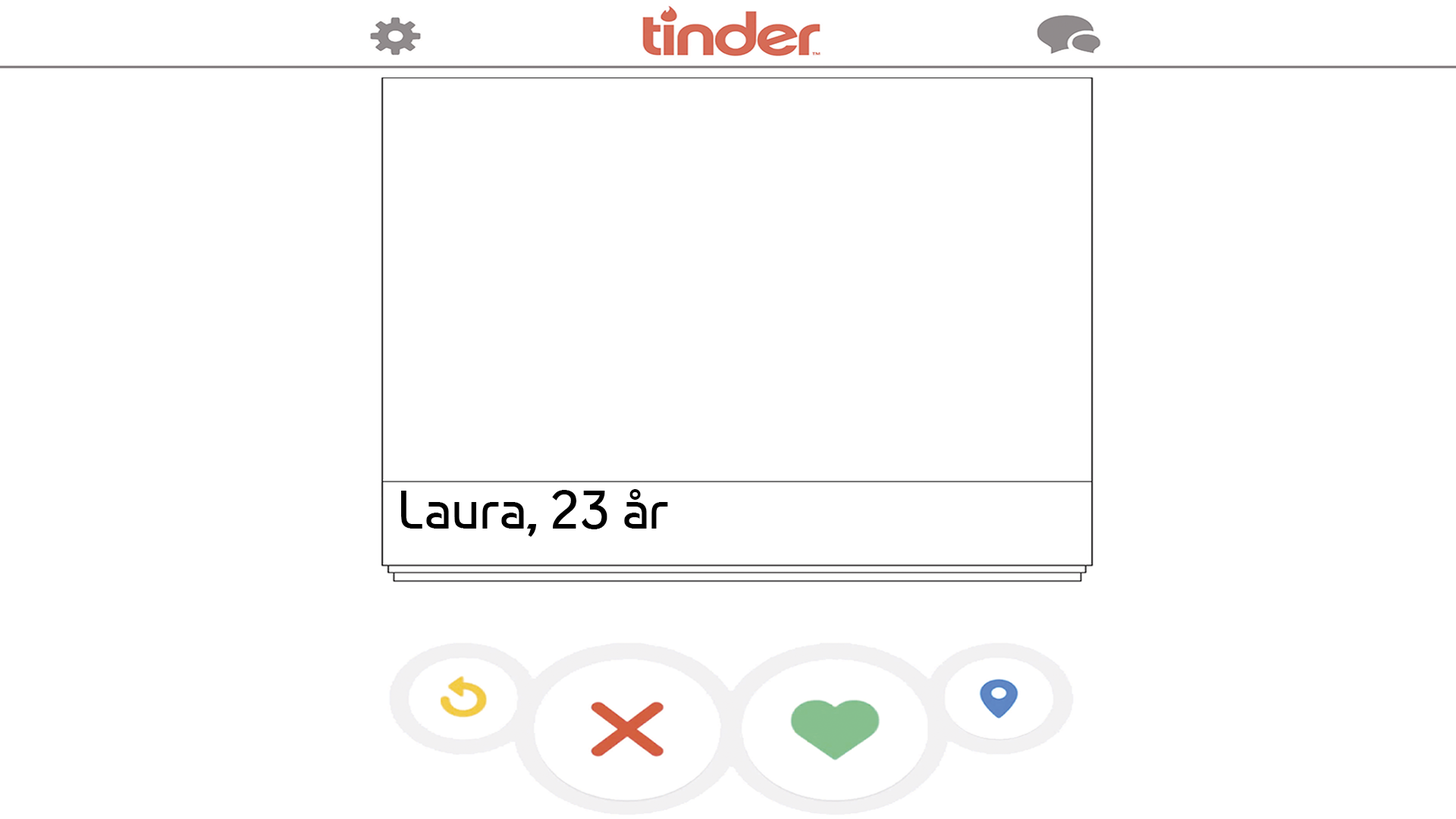
<style>
.page{position:relative;width:1456px;height:819px;background:#ffffff}
.page>*{position:absolute;margin:0}
.t1{font:54.6px "Baumans-Regular";color:#000000}
</style>
<div class="page">
<p class="t1" style="left:401px;top:489px;width:267px;height:48px">Laura, 23 år</p>
</div>
